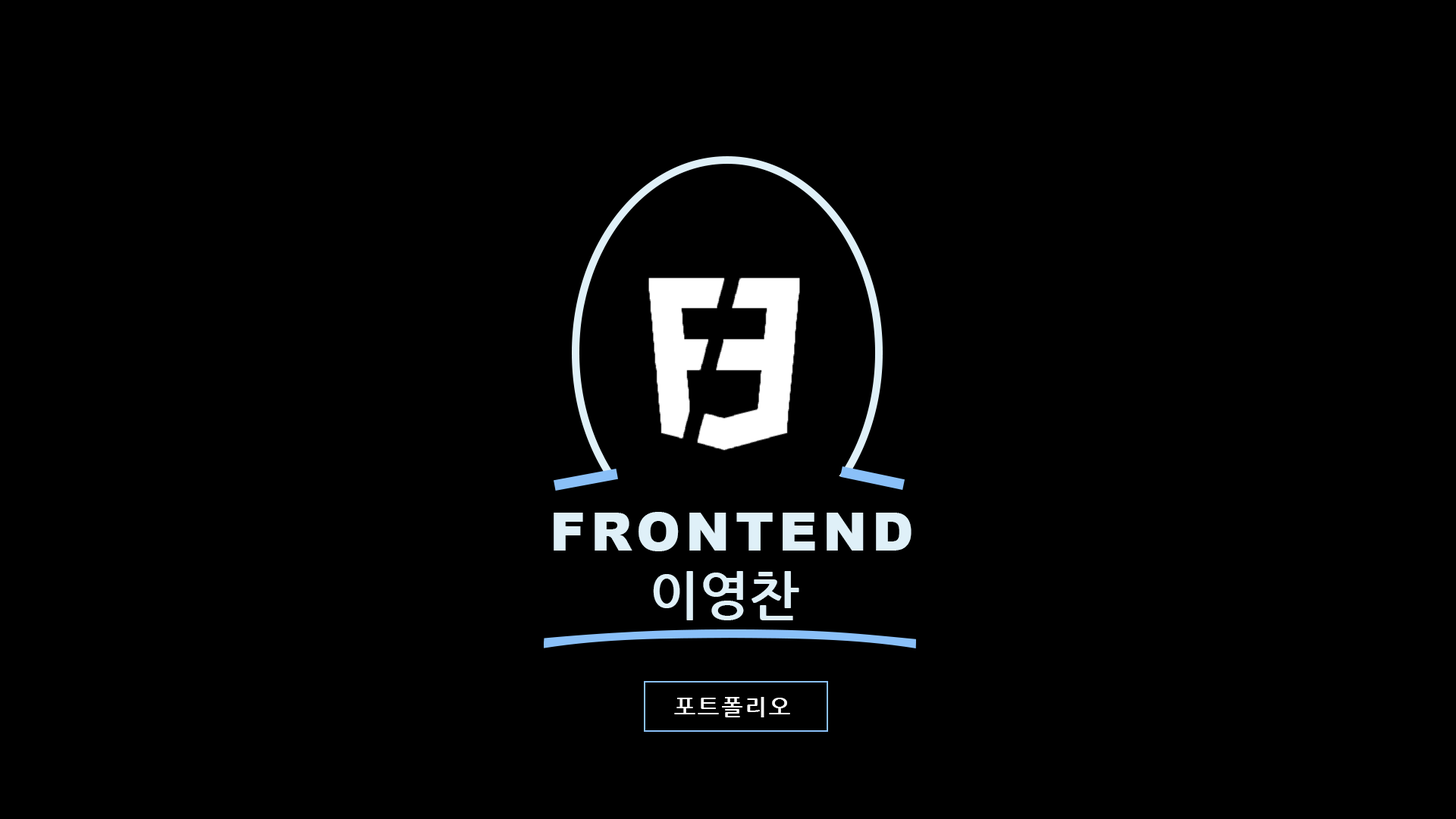
<style>
.page{position:relative;width:1456px;height:819px;background:#000000}
.page>*{position:absolute;margin:0}
.t1{font:53.1px "Arial-Black";letter-spacing:0.1em;color:#dff0f8}
.t2{font:53.1px "NanumGothicBold";letter-spacing:0.005em;color:#dff0f8}
.t3{font:22.7px "NanumGothicBold";letter-spacing:0.1em;color:#ffffff}
</style>
<div class="page">
<p class="t1" style="left:554px;top:512px;width:358px;height:39px">FRONTEND</p>
<p class="t2" style="left:653px;top:571px;width:146px;height:49px">이영찬</p>
<p class="t3" style="left:674px;top:697px;width:116px;height:20px">포트폴리오</p>
</div>
